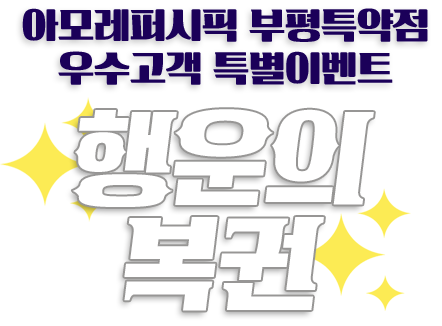
<style>
.page{position:relative;width:442px;height:326px;background:#ffffff}
.page>*{position:absolute;margin:0}
.t1{font:36px "KoreanBRSG-R";color:#1b0059}
.t2{font:100px/105px "KoreanTIMS-R";color:#ffffff}
</style>
<div class="page">
<p class="t1" style="left:22px;top:8px;width:406px;height:77px;text-align:center">아모레퍼시픽 부평특약점<br>우수고객 특별이벤트</p>
<p class="t2" style="left:72px;top:109px;width:302px;height:202px;text-align:center">행운의<br>복권</p>
</div>
